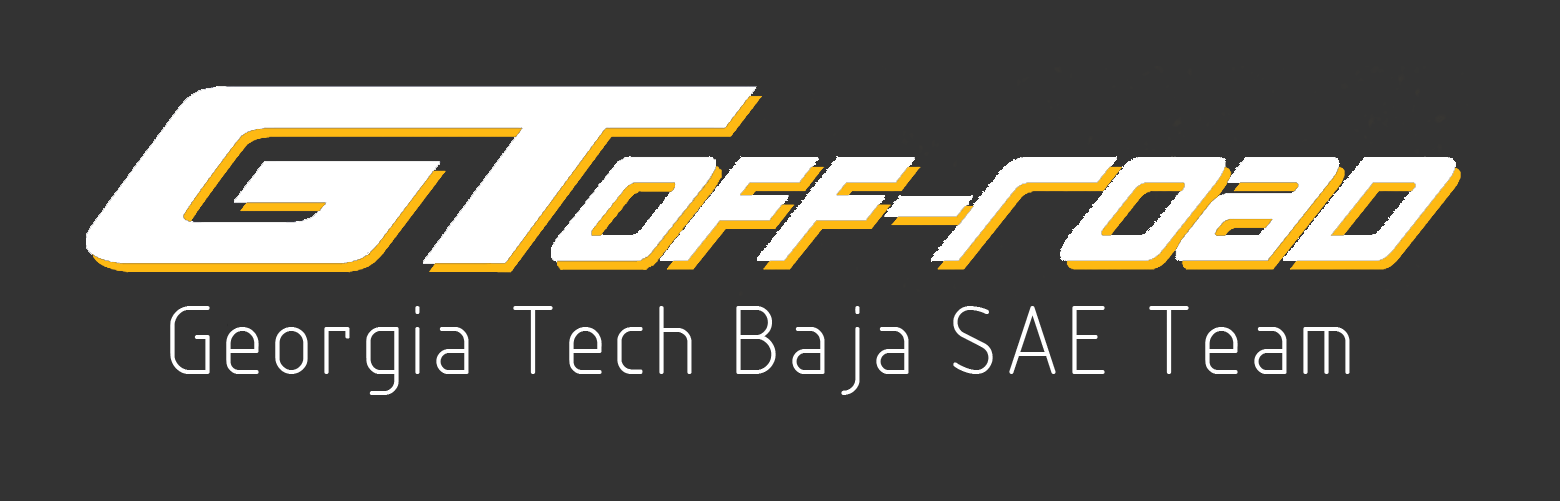
<style>
.page{position:relative;width:1560px;height:501px;background:#333333}
.page>*{position:absolute;margin:0}
.t1{font:100px "SWIsop2";color:#ffffff}
</style>
<div class="page">
<p class="t1" style="left:170px;top:306px;width:1180px;height:89px">Georgia Tech Baja SAE Team</p>
</div>
